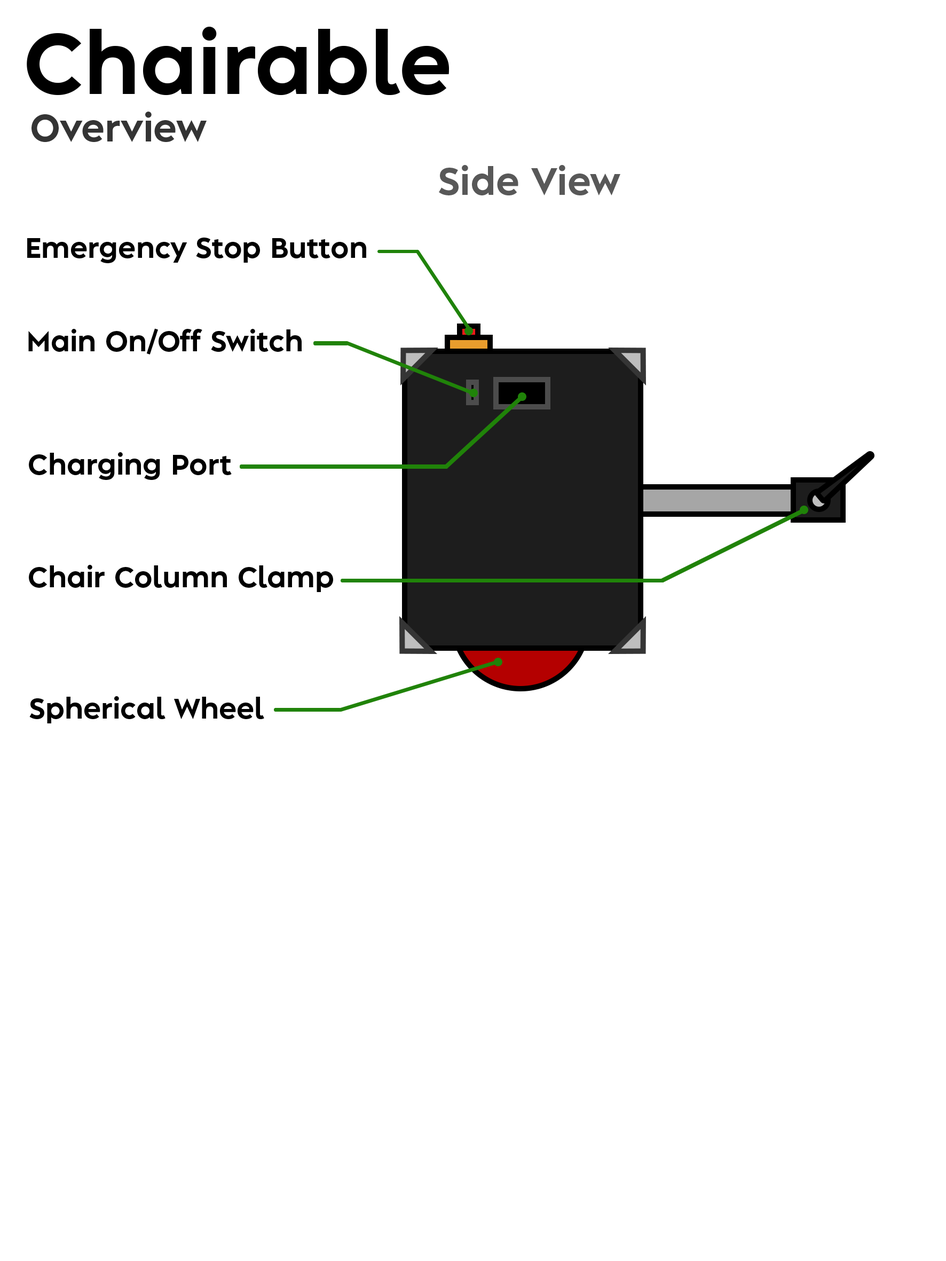
<style>
.page{position:relative;width:946px;height:1261px;background:#ffffff}
.page>*{position:absolute;margin:0}
.t1{font:80.1px "AlbulaPro-Bold";color:#000000}
.t2{font:35.6px "AlbulaPro-Bold";color:#343434}
.t3{font:35.6px "AlbulaPro-Bold";color:#585858}
.t4{font:26.7px "AlbulaPro-Bold";color:#000000}
</style>
<div class="page">
<p class="t1" style="left:27px;top:27px;width:422px;height:69px">Chairable</p>
<p class="t2" style="left:31px;top:112px;width:176px;height:30px">Overview</p>
<p class="t3" style="left:439px;top:165px;width:181px;height:30px">Side View</p>
<p class="t4" style="left:27px;top:238px;width:339px;height:25px">Emergency Stop Button</p>
<p class="t4" style="left:28px;top:328px;width:274px;height:26px">Main On/Off Switch</p>
<p class="t4" style="left:29px;top:452px;width:203px;height:28px">Charging Port</p>
<p class="t4" style="left:29px;top:565px;width:304px;height:27px">Chair Column Clamp</p>
<p class="t4" style="left:29px;top:696px;width:235px;height:27px">Spherical Wheel</p>
</div>
